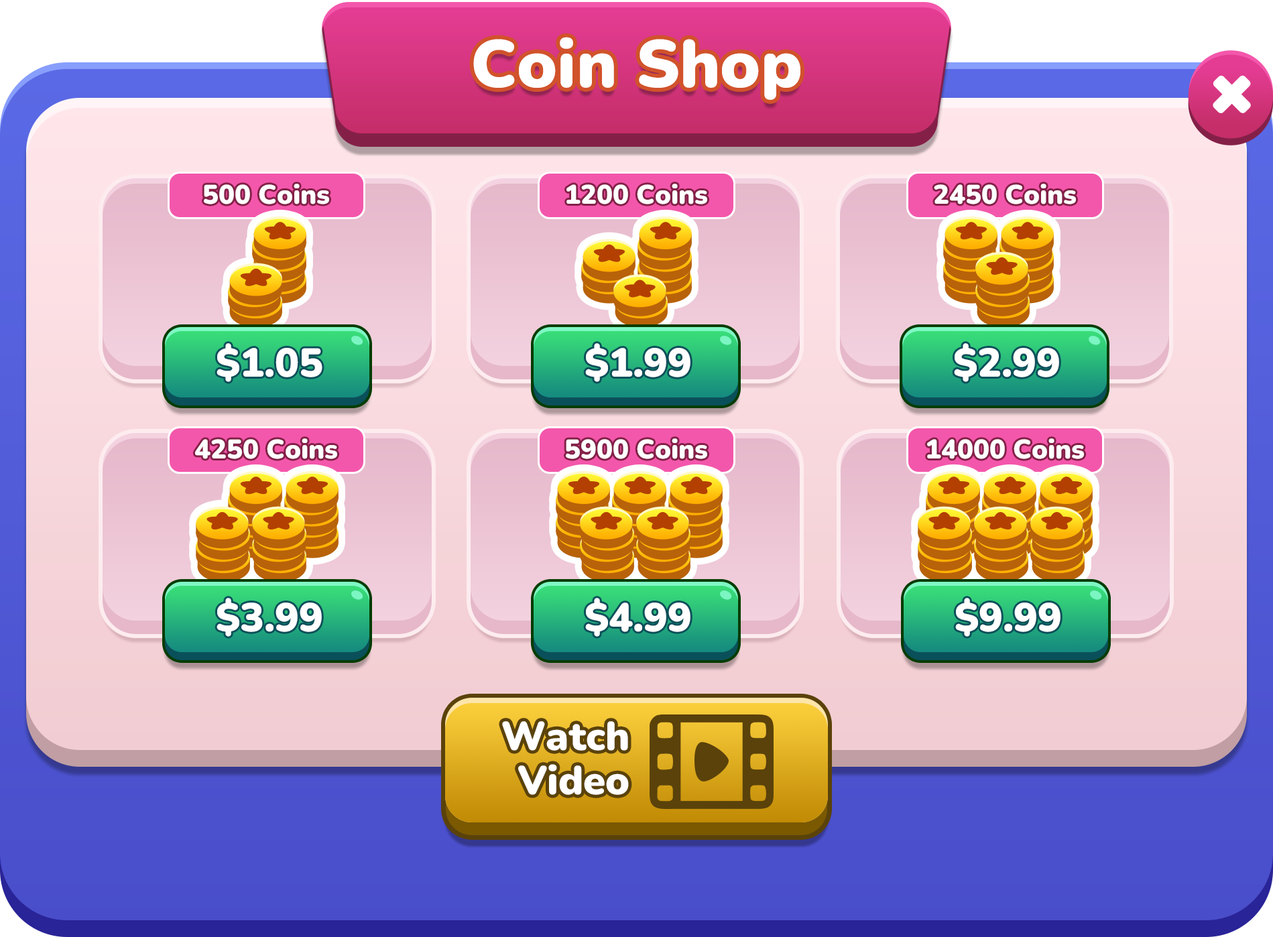
<style>
.page{position:relative;width:1273px;height:937px}
.page>*{position:absolute;margin:0}
.t1{font:67px "Nunito-Black";color:#ffffff}
.t2{font:26.8px "Nunito-Black";color:#ffffff}
.t3{font:40.2px "Nunito-Black";color:#ffffff}
.t4{font:40.2px/44.7px "Nunito-Black";color:#ffffff}
</style>
<div class="page">
<p class="t1" style="left:473px;top:37px;width:327px;height:63px">Coin Shop</p>
<p class="t2" style="left:204px;top:184px;width:125px;height:20px">500 Coins</p>
<p class="t2" style="left:566px;top:184px;width:141px;height:20px">1200 Coins</p>
<p class="t2" style="left:934px;top:184px;width:142px;height:20px">2450 Coins</p>
<p class="t3" style="left:216px;top:343px;width:106px;height:39px">$1.05</p>
<p class="t3" style="left:585px;top:343px;width:105px;height:39px">$1.99</p>
<p class="t3" style="left:954px;top:343px;width:105px;height:39px">$2.99</p>
<p class="t2" style="left:195px;top:438px;width:142px;height:21px">4250 Coins</p>
<p class="t2" style="left:566px;top:438px;width:141px;height:21px">5900 Coins</p>
<p class="t2" style="left:927px;top:438px;width:157px;height:21px">14000 Coins</p>
<p class="t3" style="left:216px;top:598px;width:106px;height:39px">$3.99</p>
<p class="t3" style="left:585px;top:598px;width:105px;height:39px">$4.99</p>
<p class="t3" style="left:955px;top:598px;width:105px;height:39px">$9.99</p>
<p class="t4" style="left:502px;top:721px;width:127px;height:74px;text-align:right">Watch<br>Video</p>
</div>
